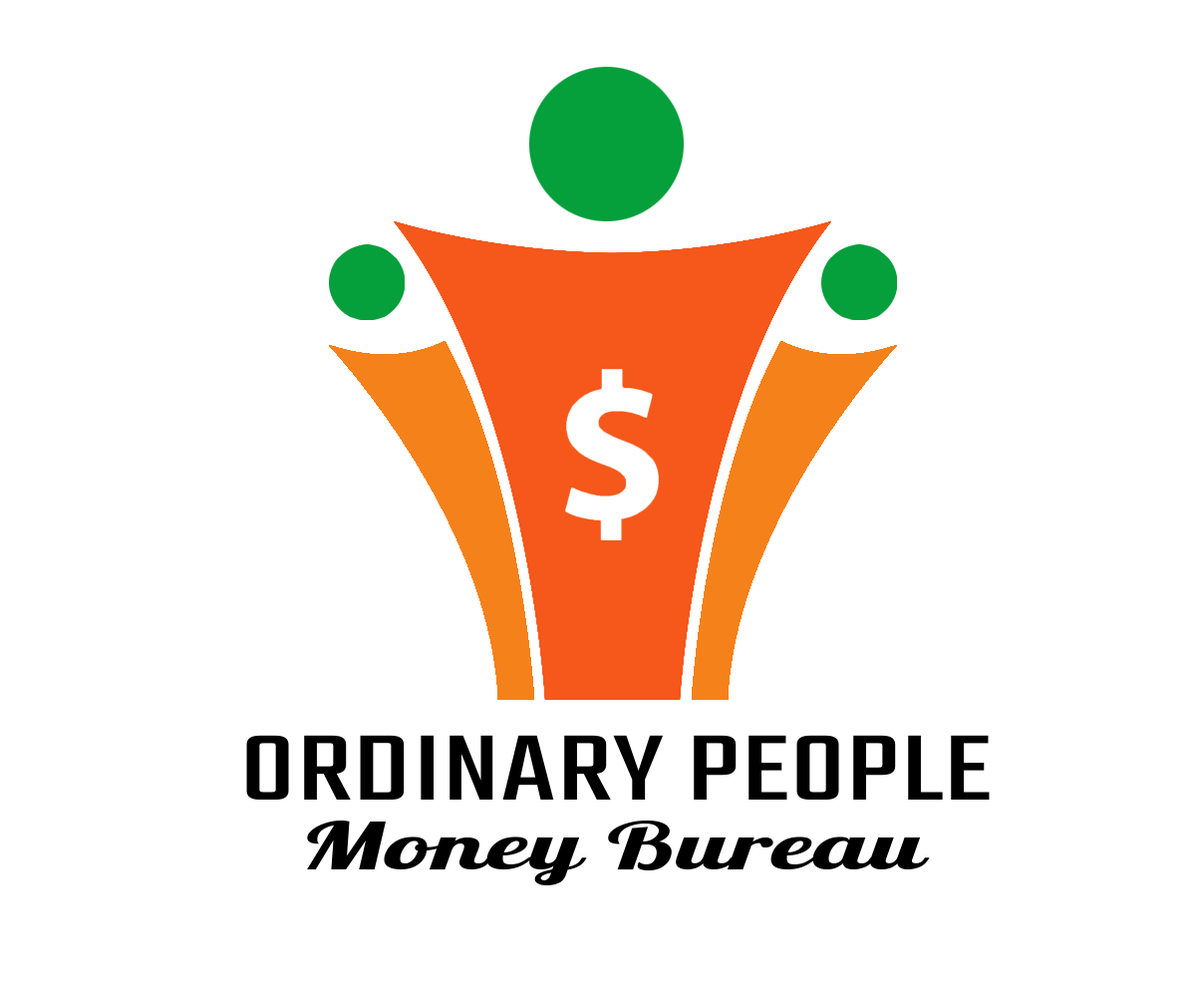
<style>
.page{position:relative;width:1196px;height:997px;background:#ffffff}
.page>*{position:absolute;margin:0}
.t1{font:102.1px "Teko-Regular";letter-spacing:0.01em;color:#000000;scale:1.37 1}
.t2{font:63.9px "Lobster-Regular";letter-spacing:0.01em;color:#000000;scale:1.67 1}
</style>
<div class="page">
<p class="t1" style="left:246px;top:735px;width:744px;height:64px">ORDINARY PEOPLE</p>
<p class="t2" style="left:307px;top:820px;width:623px;height:65px">Money Bureau</p>
</div>
